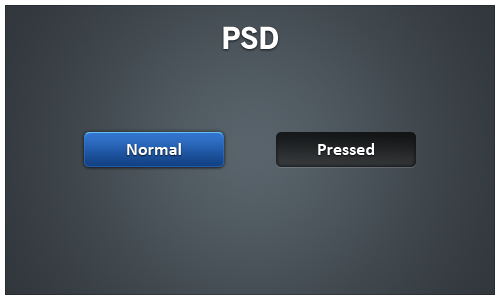
<style>
.page{position:relative;width:500px;height:300px}
.page>*{position:absolute;margin:0}
.t1{font:30px "OldSansBlack";color:#ffffff}
.t2{font:18px "Calibri-Bold";color:#ffffff}
</style>
<div class="page">
<p class="t1" style="left:223px;top:26px;width:55px;height:23px">PSD</p>
<p class="t2" style="left:127px;top:143px;width:54px;height:12px">Normal</p>
<p class="t2" style="left:318px;top:143px;width:56px;height:12px">Pressed</p>
</div>
